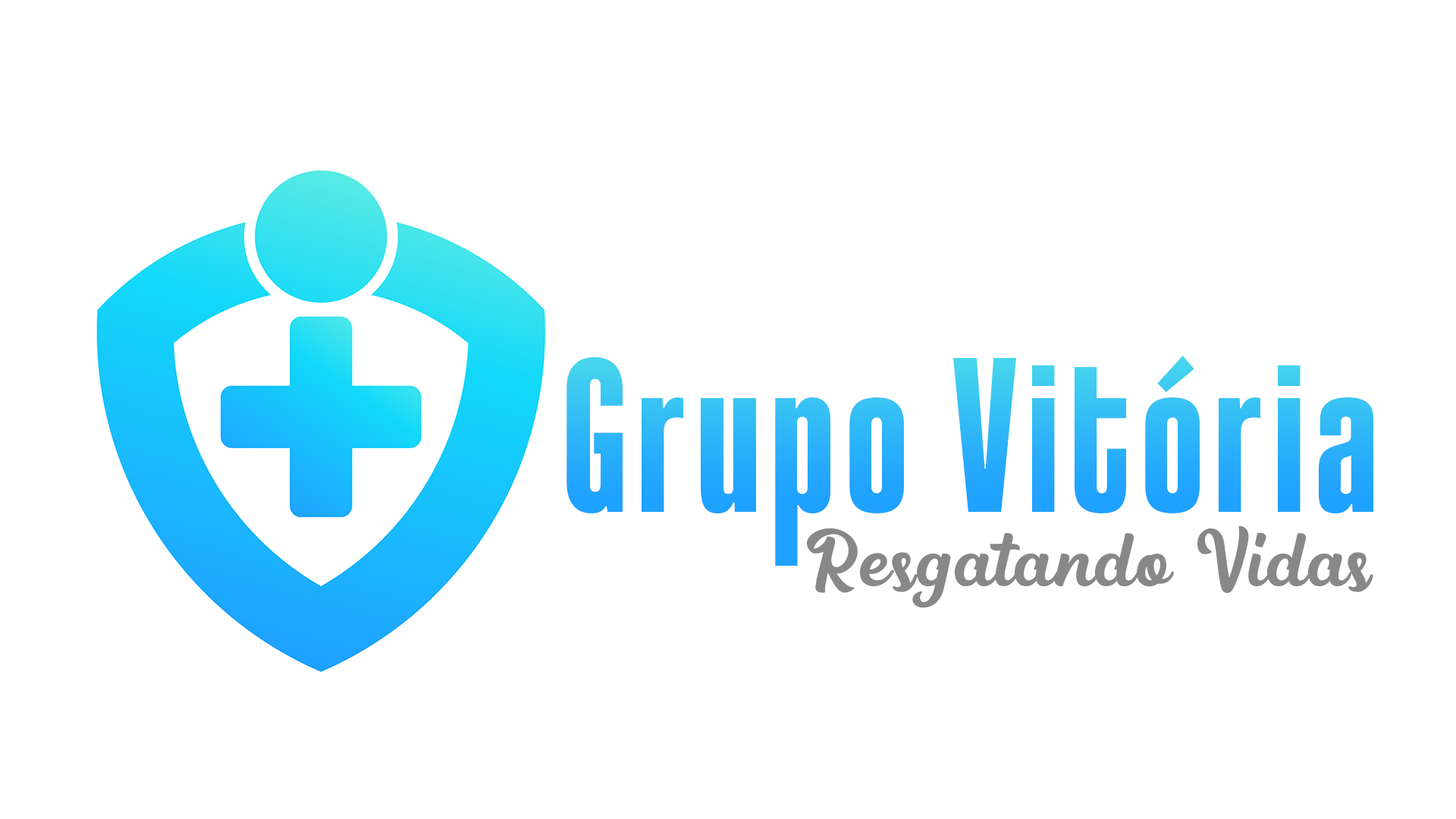
<style>
.page{position:relative;width:1456px;height:819px;background:#ffffff}
.page>*{position:absolute;margin:0}
.t1{font:231.9px "Coolvetica-HeavyComp";letter-spacing:0.05em;color:#2aaffa}
.t2{font:82.9px "Medinah";letter-spacing:0.05em;color:#888888}
</style>
<div class="page">
<p class="t1" style="left:566px;top:356px;width:807px;height:210px">Grupo Vitória</p>
<p class="t2" style="left:807px;top:526px;width:566px;height:82px">Resgatando Vidas</p>
</div>
